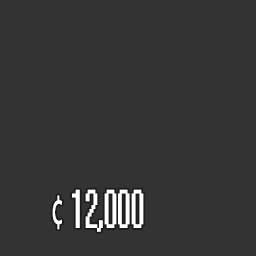
<style>
.page{position:relative;width:256px;height:256px;background:#333333}
.page>*{position:absolute;margin:0}
.t1{font:49px "System";letter-spacing:-0.08em;color:#ffffff;scale:0.5 1}
.t2{font:49px "MyriadPro-Regular";letter-spacing:-0.08em;color:#ffffff;scale:0.5 1}
</style>
<div class="page">
<p class="t1" style="left:52px;top:189px;width:92px;height:43px"><span class="t2">¢   </span>12,000</p>
</div>
